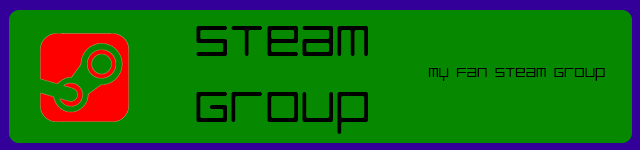
<style>
.page{position:relative;width:640px;height:150px;background:#068900}
.page>*{position:absolute;margin:0}
.t1{font:55px "LuggageRoundLight";color:#000000}
.t2{font:16px "LuggageRoundLight";color:#000000}
</style>
<div class="page">
<p class="t1" style="left:196px;top:26px;width:172px;height:108px;text-align:center">Steam Group</p>
<p class="t2" style="left:428px;top:68px;width:177px;height:13px">my fan steam group</p>
</div>
